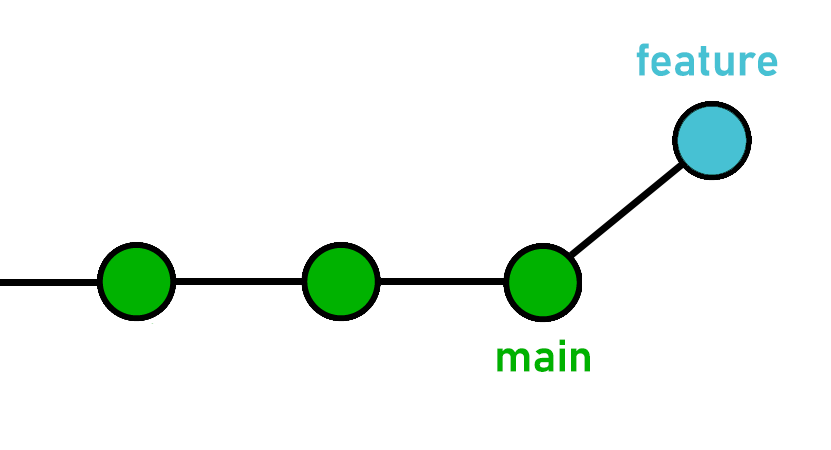
<style>
.page{position:relative;width:831px;height:450px;background:#ffffff}
.page>*{position:absolute;margin:0}
.t1{font:45px "Bahnschrift-SemiBold";color:#47c1d3}
.t2{font:45px "Bahnschrift-SemiBold";color:#00b200}
</style>
<div class="page">
<p class="t1" style="left:636px;top:43px;width:142px;height:33px">feature</p>
<p class="t2" style="left:497px;top:339px;width:93px;height:33px">main</p>
</div>
